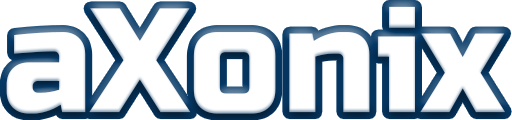
<style>
.page{position:relative;width:512px;height:120px;background:#ffffff}
.page>*{position:absolute;margin:0}
.t1{font:148px "RussoOne-Regular";color:#ffffff}
</style>
<div class="page">
<p class="t1" style="left:6px;top:6px;width:499px;height:108px">aXonix</p>
</div>
